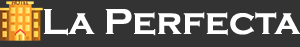
<style>
.page{position:relative;width:300px;height:47px;background:#333333}
.page>*{position:absolute;margin:0}
.t1{font:37.5px "CopperplateGothic-Bold";color:#ffffff}
</style>
<div class="page">
<p class="t1" style="left:43px;top:9px;width:258px;height:27px">La Perfecta</p>
</div>
